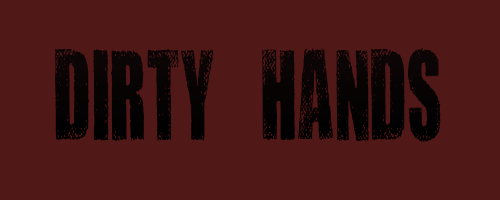
<style>
.page{position:relative;width:500px;height:200px;background:#511818}
.page>*{position:absolute;margin:0}
.t1{font:150.2px "DIRTYBAGBOLDTRIAL";color:#000000;scale:0.61 1}
</style>
<div class="page">
<p class="t1" style="left:55px;top:48px;width:386px;height:94px">Dirty HAnds</p>
</div>
